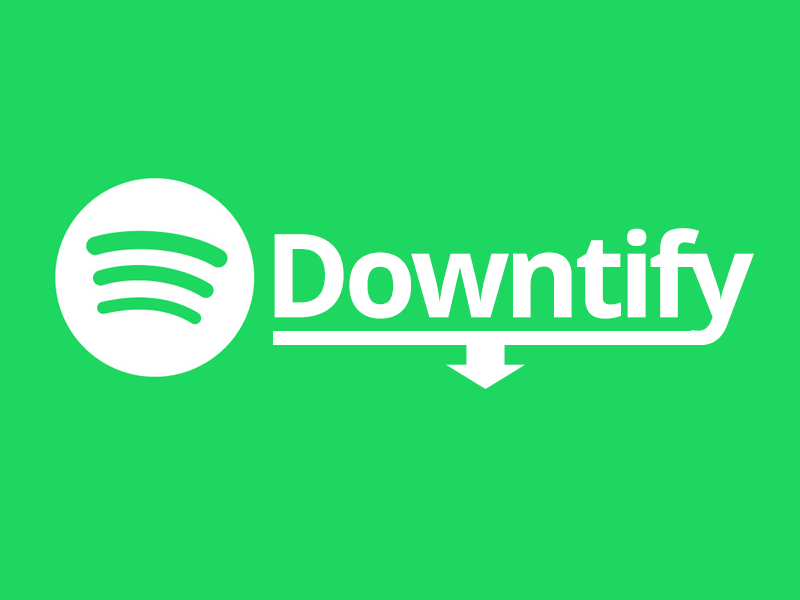
<style>
.page{position:relative;width:800px;height:600px;background:#1ed760}
.page>*{position:absolute;margin:0}
.t1{font:116px "OpenSans-Bold";letter-spacing:-0.05em;color:#ffffff}
</style>
<div class="page">
<p class="t1" style="left:274px;top:228px;width:480px;height:117px">Downtify</p>
</div>
